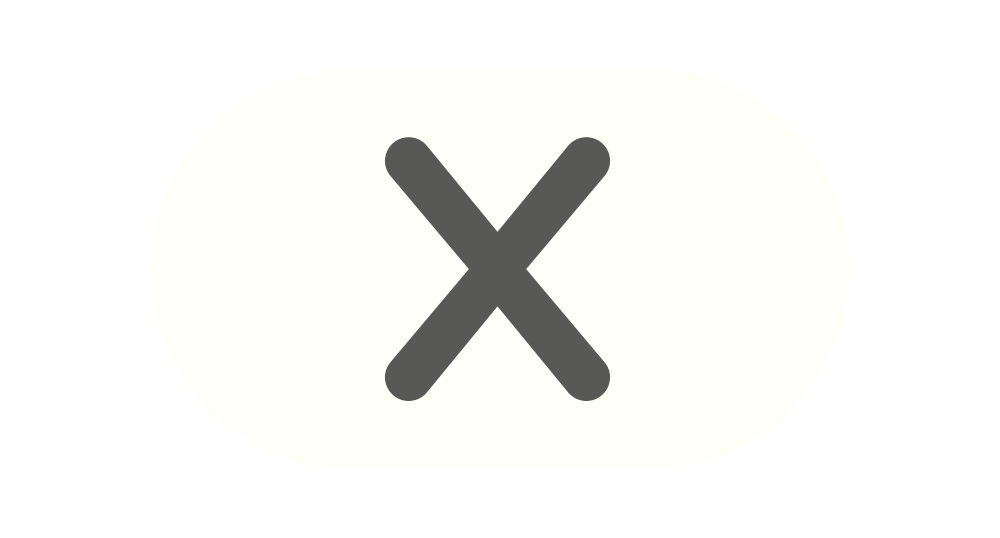
<style>
.page{position:relative;width:1000px;height:538px;background:#ffffff}
.page>*{position:absolute;margin:0}
.t1{font:388px "PollyRounded-Bold";color:#585856}
</style>
<div class="page">
<p class="t1" style="left:384px;top:137px;width:227px;height:264px">X</p>
</div>
